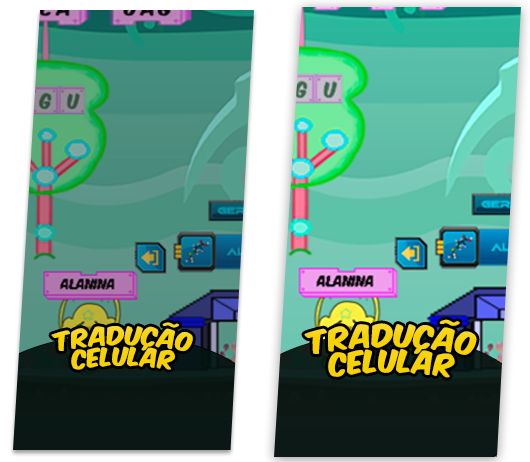
<style>
.page{position:relative;width:530px;height:462px}
.page>*{position:absolute;margin:0}
.t1{font:21.8px/20.8px "KomikaAxis";letter-spacing:0.01em;color:#f7d203}
.t2{font:26.7px/25.5px "KomikaAxis";letter-spacing:0.01em;color:#f7d203}
</style>
<div class="page">
<p class="t1" style="left:51px;top:322px;width:142px;height:48px;text-align:center">tradução<br>celular</p>
<p class="t2" style="left:304px;top:319px;width:173px;height:59px;text-align:center;rotate:1deg">tradução<br>celular</p>
</div>
